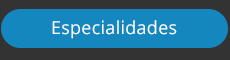
<style>
.page{position:relative;width:230px;height:60px;background:#1487be}
.page>*{position:absolute;margin:0}
.t1{font:18px "OpenSans";letter-spacing:0.015em;color:#ffffff}
</style>
<div class="page">
<p class="t1" style="left:52px;top:20px;width:125px;height:19px">Especialidades</p>
</div>
